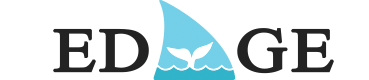
<style>
.page{position:relative;width:369px;height:80px;background:#ffffff}
.page>*{position:absolute;margin:0}
.t1{font:92px "Microsoft-Himalaya";color:#232323;font-weight:bold;scale:1.16 1}
</style>
<div class="page">
<p class="t1" style="left:53px;top:28px;width:281px;height:46px">ED    GE</p>
</div>
